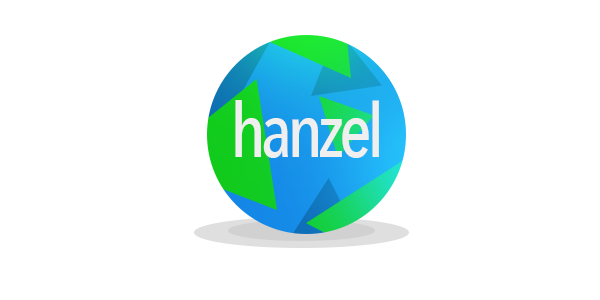
<style>
.page{position:relative;width:600px;height:300px;background:#ffffff}
.page>*{position:absolute;margin:0}
.t1{font:75px "AvenirNextCondensed-Medium";letter-spacing:-0.07em;color:#efefef}
</style>
<div class="page">
<p class="t1" style="left:235px;top:100px;width:144px;height:58px">hanzel</p>
</div>
